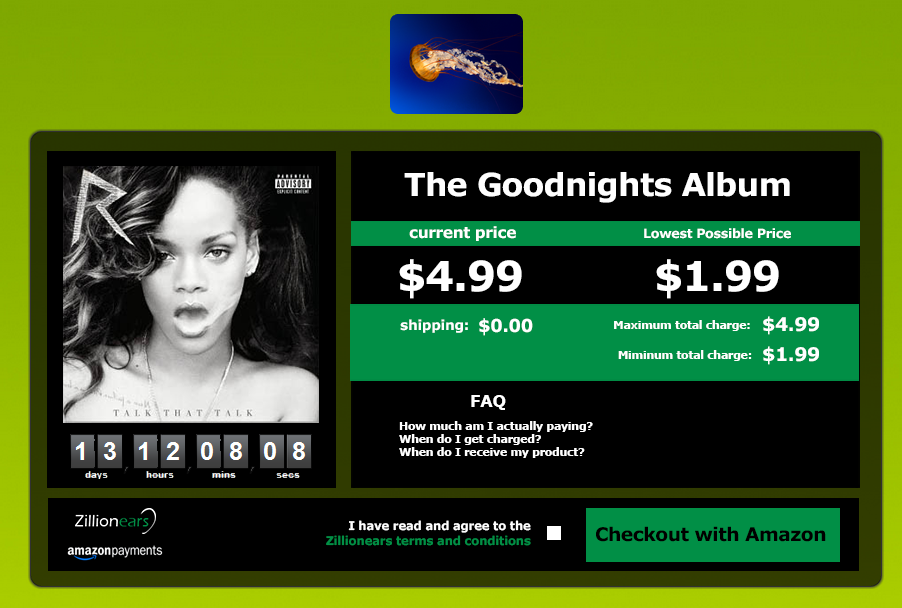
<style>
.page{position:relative;width:902px;height:608px;background:#000000}
.page>*{position:absolute;margin:0}
.t1{font:31.7px "Verdana-Bold";letter-spacing:-0.025em;color:#fefefe}
.t2{font:15.4px "Verdana-Bold";letter-spacing:-0.025em;color:#ffffff}
.t3{font:12.9px "Verdana-Bold";letter-spacing:-0.025em;color:#ffffff}
.t4{font:41.1px "Verdana-Bold";letter-spacing:-0.025em;color:#ffffff}
.t5{font:18px "Verdana-Bold";letter-spacing:-0.025em;color:#ffffff}
.t6{font:18.9px "Verdana-Bold";letter-spacing:-0.025em;color:#ffffff}
.t7{font:13.7px "Verdana-Bold";letter-spacing:-0.025em;color:#ffffff}
.t8{font:11px "Verdana-Bold";letter-spacing:-0.025em;color:#ffffff}
.t9{font:17.1px "Verdana-Bold";letter-spacing:-0.025em;color:#ffffff;scale:0.95 1}
.t10{font:12px "Verdana-Bold";letter-spacing:-0.025em;color:#018f46}
.t11{font:12px "Verdana-Bold";letter-spacing:-0.025em;color:#ffffff}
.t12{font:18.9px "Verdana-Bold";letter-spacing:-0.025em;color:#000000}
</style>
<div class="page">
<p class="t1" style="left:404px;top:172px;width:386px;height:31px">The Goodnights Album</p>
<p class="t2" style="left:409px;top:226px;width:107px;height:15px">current price</p>
<p class="t3" style="left:644px;top:228px;width:147px;height:11px">Lowest Possible Price</p>
<p class="t4" style="left:399px;top:259px;width:123px;height:40px">$4.99</p>
<p class="t4" style="left:656px;top:259px;width:123px;height:40px">$1.99</p>
<p class="t5" style="left:479px;top:318px;width:54px;height:18px">$0.00</p>
<p class="t6" style="left:763px;top:316px;width:56px;height:19px">$4.99</p>
<p class="t7" style="left:400px;top:319px;width:68px;height:14px">shipping:</p>
<p class="t8" style="left:614px;top:320px;width:136px;height:11px">Maximum total charge:</p>
<p class="t8" style="left:618px;top:350px;width:134px;height:11px">Miminum total charge:</p>
<p class="t6" style="left:763px;top:346px;width:56px;height:19px">$1.99</p>
<p class="t9" style="left:471px;top:395px;width:35px;height:15px">FAQ</p>
<p class="t8" style="left:399px;top:421px;width:194px;height:37px">How much am I actually paying?<br>When do I get charged?<br>When do I receive my product?</p>
<p class="t10" style="left:326px;top:520px;width:205px;height:26px;text-align:right"><span class="t11">I have read and agree to the<br></span>Zillionears terms and conditions</p>
<p class="t12" style="left:596px;top:526px;width:230px;height:16px">Checkout with Amazon</p>
</div>
